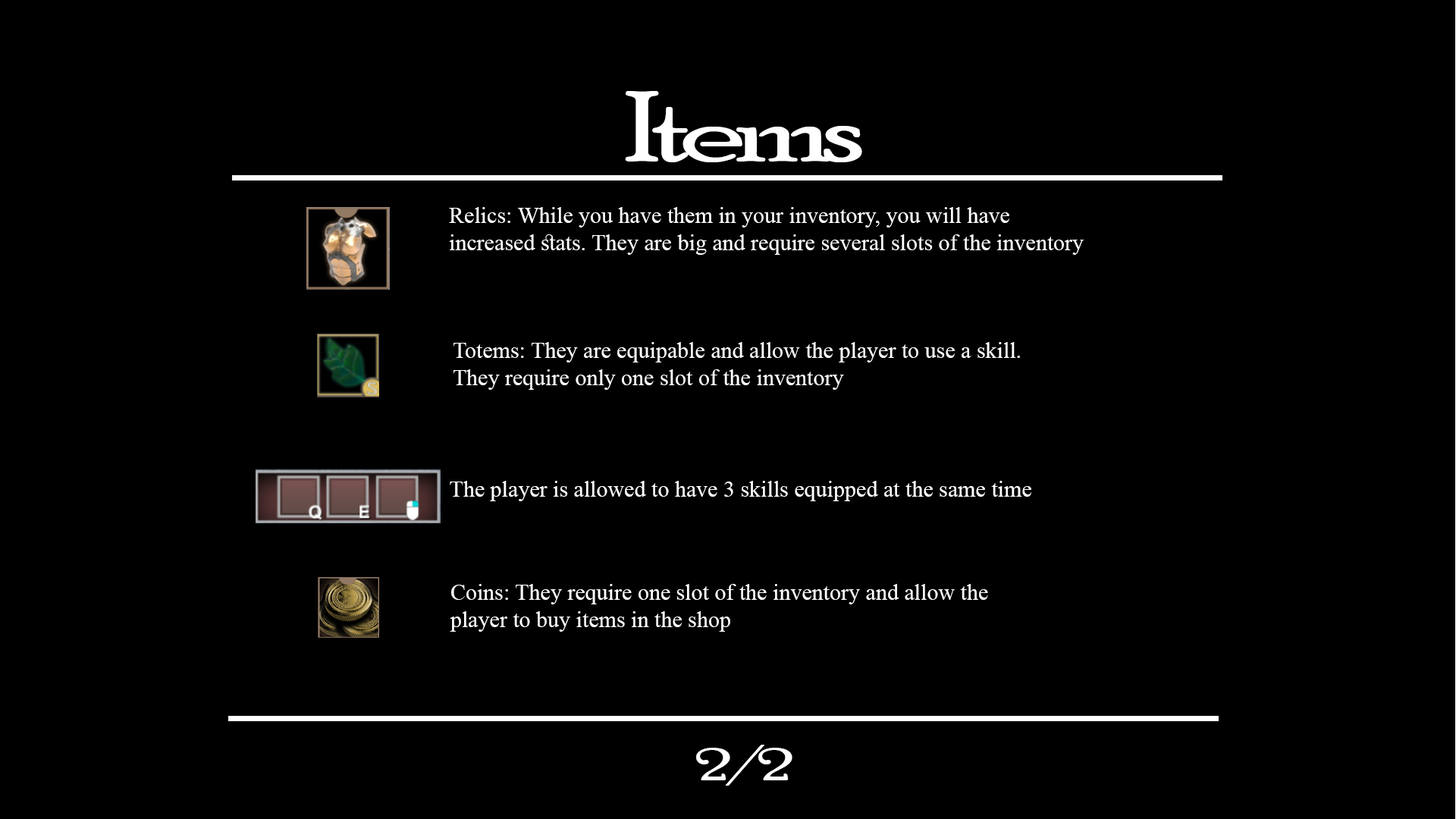
<style>
.page{position:relative;width:1456px;height:819px;background:#000000}
.page>*{position:absolute;margin:0}
.t1{font:99.6px "PoorRichard-Regular";letter-spacing:-0.08em;color:#ffffff;scale:1.45 1}
.t2{font:22.7px "TimesNewRomanPSMT";color:#ffffff}
.t3{font:45.5px "PoorRichard-Regular";letter-spacing:-0.08em;color:#ffffff;scale:1.45 1}
</style>
<div class="page">
<p class="t1" style="left:625px;top:91px;width:237px;height:71px">Items</p>
<p class="t2" style="left:449px;top:207px;width:635px;height:48px">Relics: While you have them in your inventory, you will have<br>increased stats. They are big and require several slots of the inventory</p>
<p class="t2" style="left:453px;top:342px;width:567px;height:48px">Totems: They are equipable and allow the player to use a skill.<br>They require only one slot of the inventory</p>
<p class="t2" style="left:450px;top:481px;width:581px;height:20px">The player is allowed to have 3 skills equipped at the same time</p>
<p class="t2" style="left:450px;top:584px;width:538px;height:48px">Coins: They require one slot of the inventory and allow the<br>player to buy items in the shop</p>
<p class="t3" style="left:696px;top:745px;width:96px;height:41px">2/2</p>
</div>
